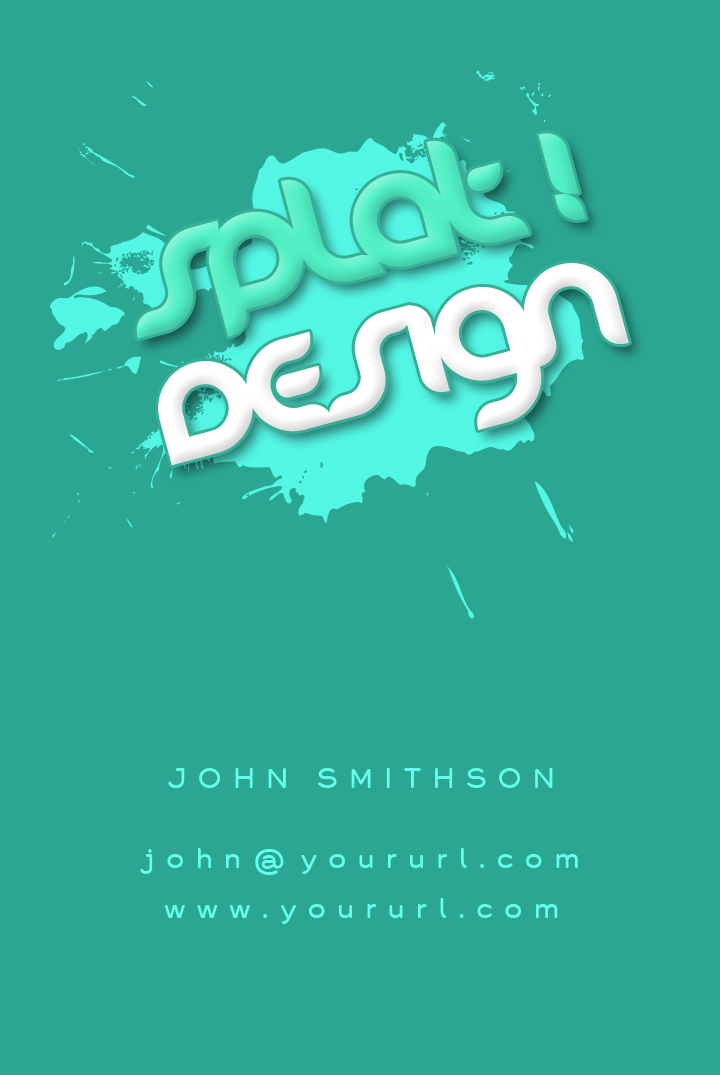
<style>
.page{position:relative;width:720px;height:1075px;background:#2ba693}
.page>*{position:absolute;margin:0}
.t1{font:109.3px "DanubeBold";letter-spacing:-0.095em;color:#ffffff}
.t2{font:109.3px "DanubeBold";letter-spacing:-0.095em;color:#51f0c6}
.t3{font:109.3px "DanubeBold";letter-spacing:-0.095em;color:#51f0c4}
.t4{font:25px/50px "Grover";letter-spacing:0.4em;color:#65ffee}
.t5{font:25px "Grover";letter-spacing:0.4em;color:#65ffee}
.t6{font:33.3px/50px "Grover";letter-spacing:0.4em;color:#65ffee}
</style>
<div class="page">
<p class="t1" style="left:136px;top:133px;width:493px;height:333px;rotate:-15deg"><span class="t2">s</span><span class="t3">pl</span><span class="t2">at !<br></span>design</p>
<p class="t4" style="left:140px;top:768px;width:438px;height:156px;text-align:center"><span class="t5">JOHN SMITHSON<br><br></span>john<span class="t6">@</span>yoururl.com<br>www.yoururl.com</p>
</div>
